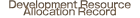
<style>
.page{position:relative;width:140px;height:18px;background:#ffffff}
.page>*{position:absolute;margin:0}
.t1{font:10px/7px "GothicMB101Pro-DeBold";letter-spacing:-0.04em;color:#705e4c}
</style>
<div class="page">
<p class="t1" style="left:9px;top:0px;width:122px;height:16px;text-align:center">Development Resource<br>Allocation Record</p>
</div>
